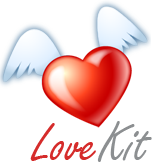
<style>
.page{position:relative;width:153px;height:162px;background:#ffffff}
.page>*{position:absolute;margin:0}
.t1{font:60px "FreestyleScript-Regular";color:#d52c2b}
.t2{font:60px "FreestyleScript-Regular";color:#8c8f91}
</style>
<div class="page">
<p class="t1" style="left:30px;top:121px;width:122px;height:41px">Love<span class="t2">Kit</span></p>
</div>
